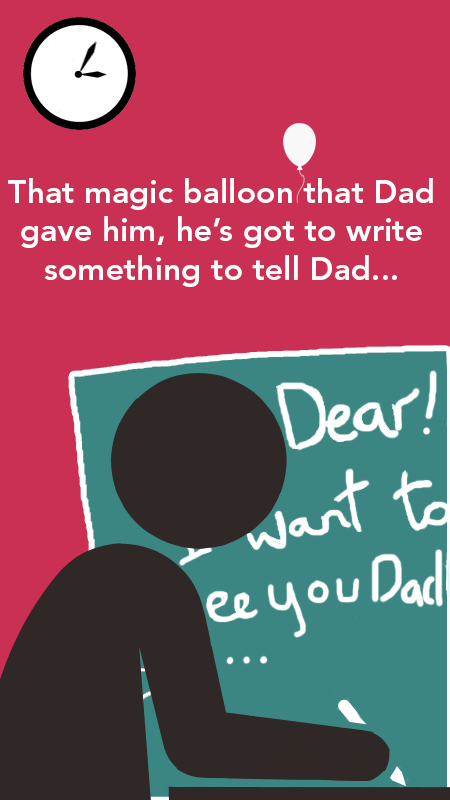
<style>
.page{position:relative;width:450px;height:800px;background:#ca3054}
.page>*{position:absolute;margin:0}
.t1{font:32px "AvenirLTStd-Heavy";color:#ffffff}
</style>
<div class="page">
<p class="t1" style="left:8px;top:178px;width:425px;height:109px;text-align:center">That magic balloon that Dad<br>gave him, he’s got to write<br>something to tell Dad...</p>
</div>
